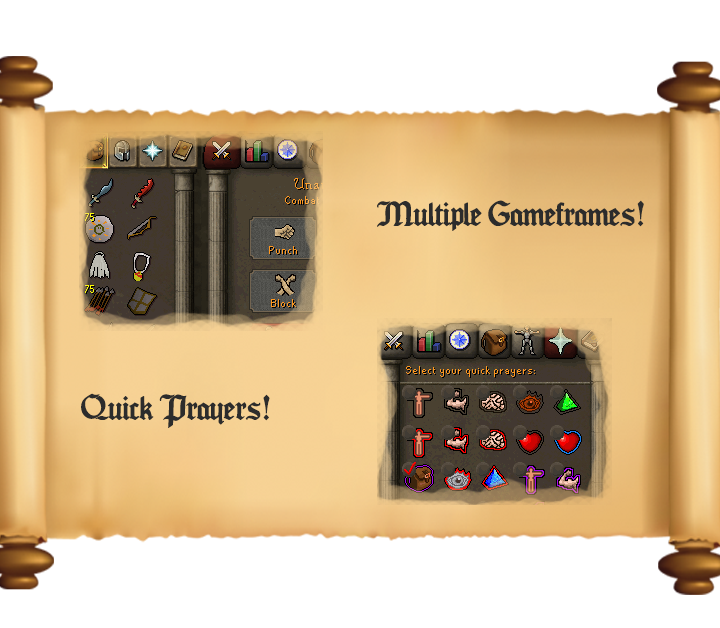
<style>
.page{position:relative;width:720px;height:628px;background:#ffffff}
.page>*{position:absolute;margin:0}
.t1{font:30px "Seagramtfb";letter-spacing:-0.03em;color:#2c2c2c}
</style>
<div class="page">
<p class="t1" style="left:377px;top:200px;width:267px;height:31px">Multiple Gameframes!</p>
<p class="t1" style="left:81px;top:393px;width:189px;height:35px">Quick Prayers!</p>
</div>
